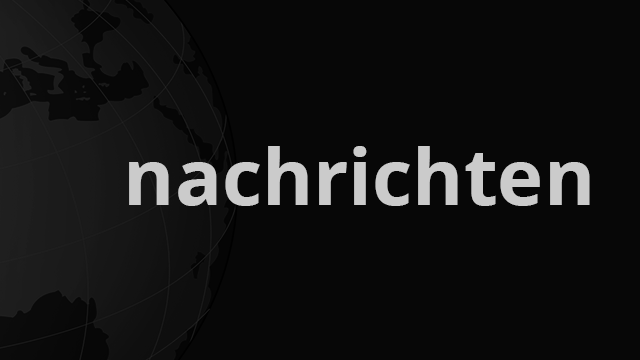
<style>
.page{position:relative;width:640px;height:360px;background:#070707}
.page>*{position:absolute;margin:0}
.t1{font:78px "OpenSans-Bold";color:#cbcbcb}
</style>
<div class="page">
<p class="t1" style="left:129px;top:146px;width:461px;height:60px">nachrichten</p>
</div>
